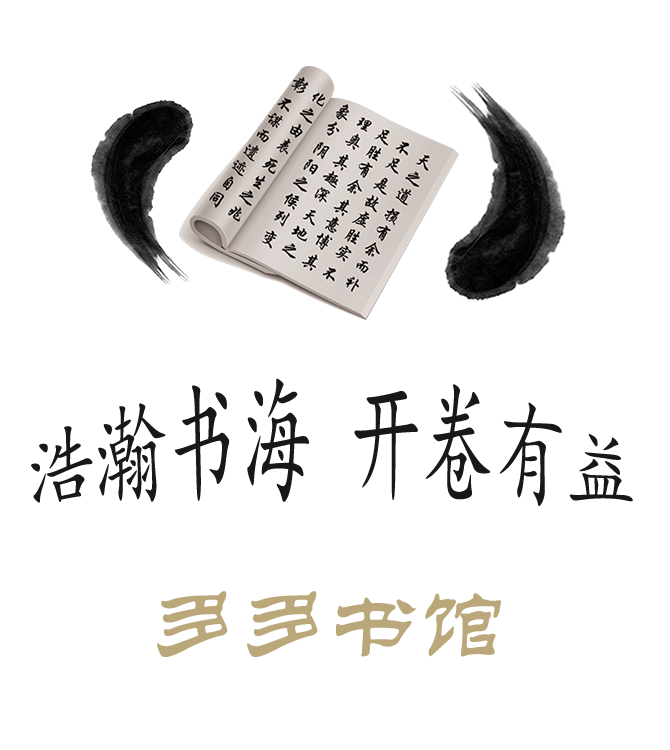
<style>
.page{position:relative;width:670px;height:750px;background:#ffffff}
.page>*{position:absolute;margin:0}
.t1{font:72px/42px "KaiTi";color:#181817}
.t2{font:90px "STLiti";color:#baa87a}
</style>
<div class="page">
<p class="t1" style="left:31px;top:378px;width:602px;height:128px;text-align:center">浩瀚书海 开卷有益</p>
<p class="t2" style="left:157px;top:591px;width:344px;height:66px">多多书馆</p>
</div>
